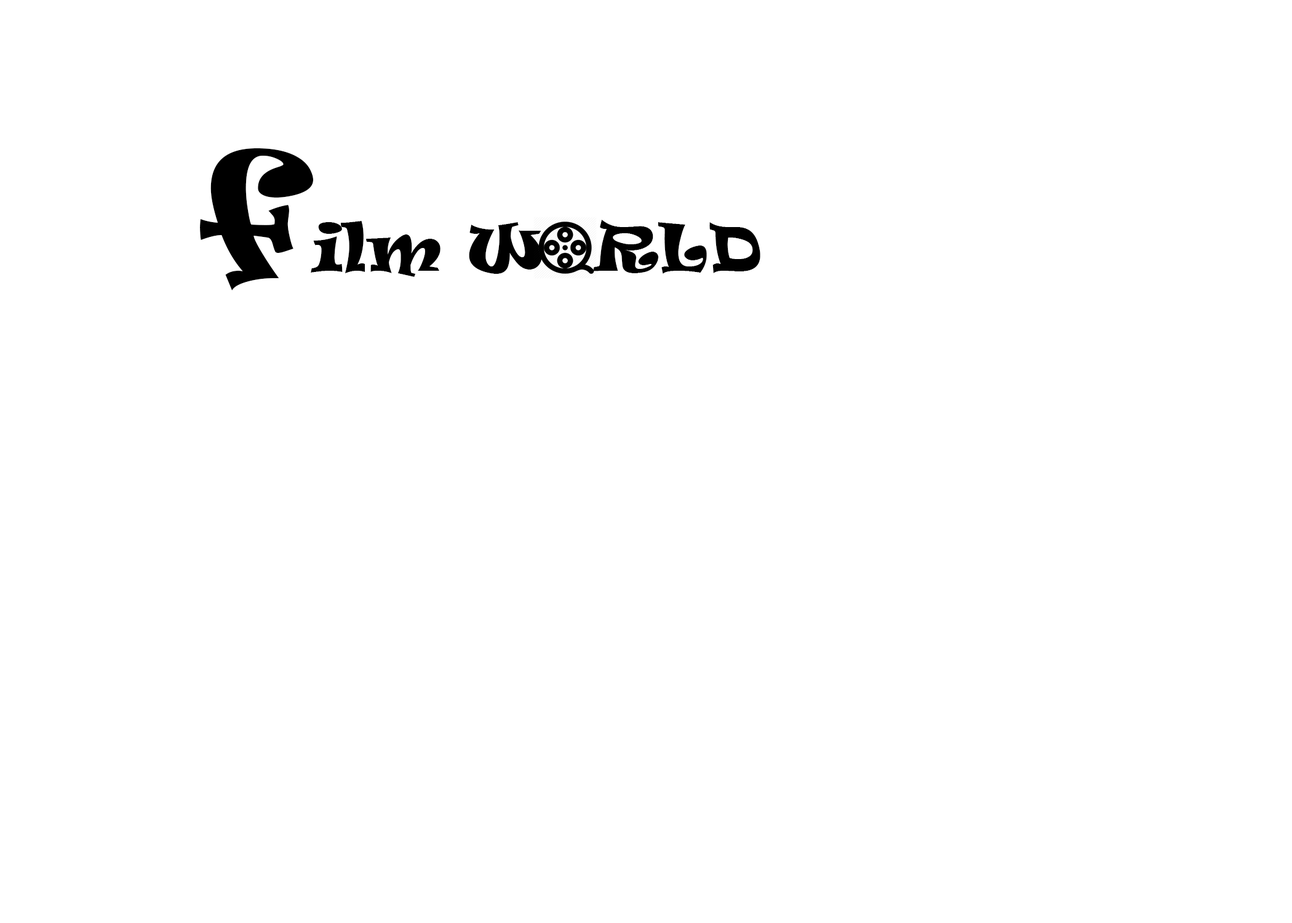
<style>
.page{position:relative;width:1292px;height:923px;background:#ffffff}
.page>*{position:absolute;margin:0}
.t1{font:61.5px "Ravie";color:#000000}
.t2{font:153.8px "Ravie";color:#000000}
</style>
<div class="page">
<p class="t1" style="left:200px;top:148px;width:560px;height:142px"><span class="t2">f</span>ilm W  RLD</p>
</div>
